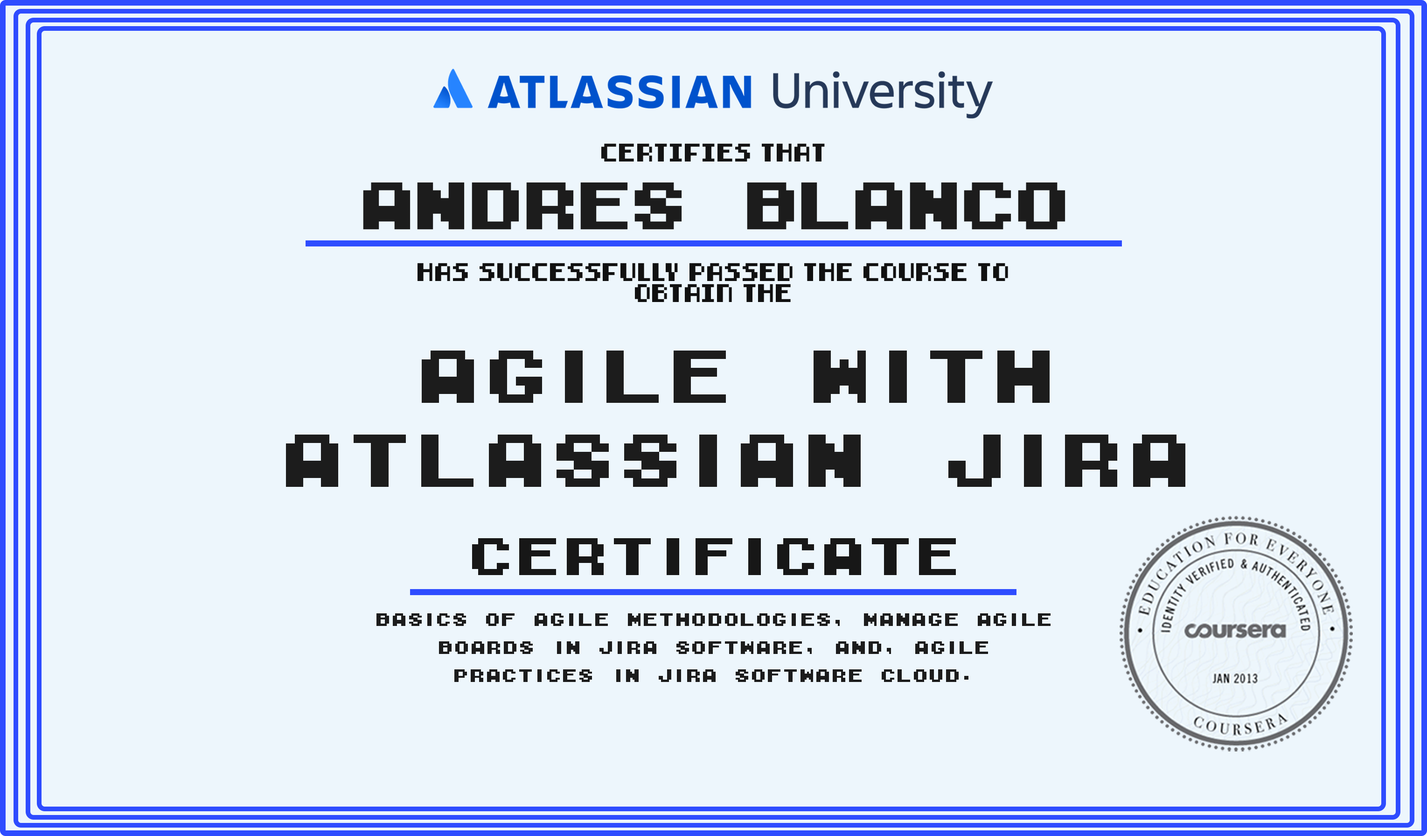
<style>
.page{position:relative;width:1427px;height:836px;background:#edf6fc}
.page>*{position:absolute;margin:0}
.t1{font:17.8px "8-bit-pusab";color:#141414}
.t2{font:62.4px "M04_FATAL-FURY-BLACK";letter-spacing:-0.1em;color:#1c1c1c}
.t3{font:17.8px "8-bit-pusab";color:#111111}
.t4{font:70px "M04_FATAL-FURY-BLACK";color:#1c1c1c}
.t5{font:49.1px "M04_FATAL-FURY-BLACK";color:#171717}
.t6{font:16.3px/28px "M04_FATAL-FURY-BLACK";color:#1c1c1c}
</style>
<div class="page">
<p class="t1" style="left:601px;top:143px;width:224px;height:18px">certifies that</p>
<p class="t2" style="left:363px;top:182px;width:703px;height:48px">Andres Blanco</p>
<p class="t3" style="left:418px;top:263px;width:590px;height:39px;text-align:center">has successfully passed the course to  obtain the</p>
<p class="t4" style="left:286px;top:350px;width:899px;height:137px;text-align:center">Agile with Atlassian Jira</p>
<p class="t5" style="left:472px;top:538px;width:484px;height:37px">Certificate</p>
<p class="t6" style="left:376px;top:613px;width:675px;height:69px;text-align:center">Basics of agile methodologies, manage AGILE BOARDS IN Jira sOFTWARE, AND, AGILE PRACTICES IN jIRA sOFTWARE cLOUD.</p>
</div>
